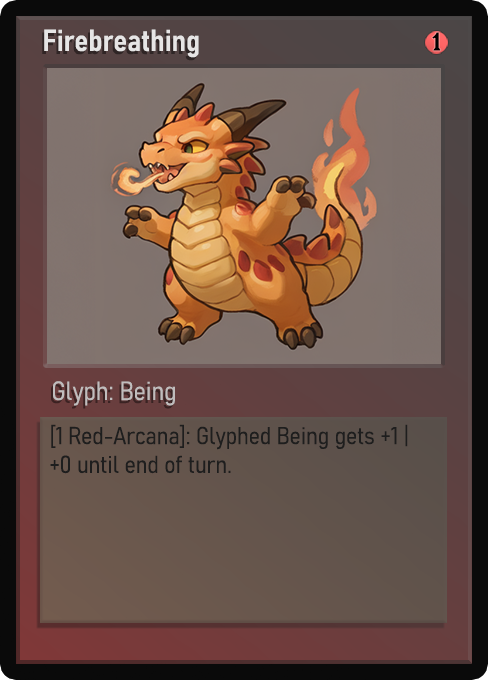
<style>
.page{position:relative;width:488px;height:680px}
.page>*{position:absolute;margin:0}
.t1{font:30px "Bahnschrift-SemiBoldSemiCondensed";color:#f2f2f2;font-weight:bold}
.t2{font:25px "WTRRoycroft";color:#000000;font-weight:bold;scale:1.09 1}
.t3{font:26px "Bahnschrift-LightSemiCondensed";color:#c8c8c8;font-weight:bold}
.t4{font:24px "Bahnschrift-LightSemiCondensed";color:#1e1e1e;font-weight:bold}
</style>
<div class="page">
<p class="t1" style="left:44px;top:29px;width:155px;height:29px;opacity:0.9">Firebreathing</p>
<p class="t2" style="left:432px;top:32px;width:9px;height:19px">1</p>
<p class="t3" style="left:53px;top:381px;width:122px;height:25px;opacity:0.9">Glyph: Being</p>
<p class="t4" style="left:50px;top:424px;width:358px;height:50px">[1 Red-Arcana]: Glyphed Being gets +1 | +0 until end of turn.</p>
</div>
